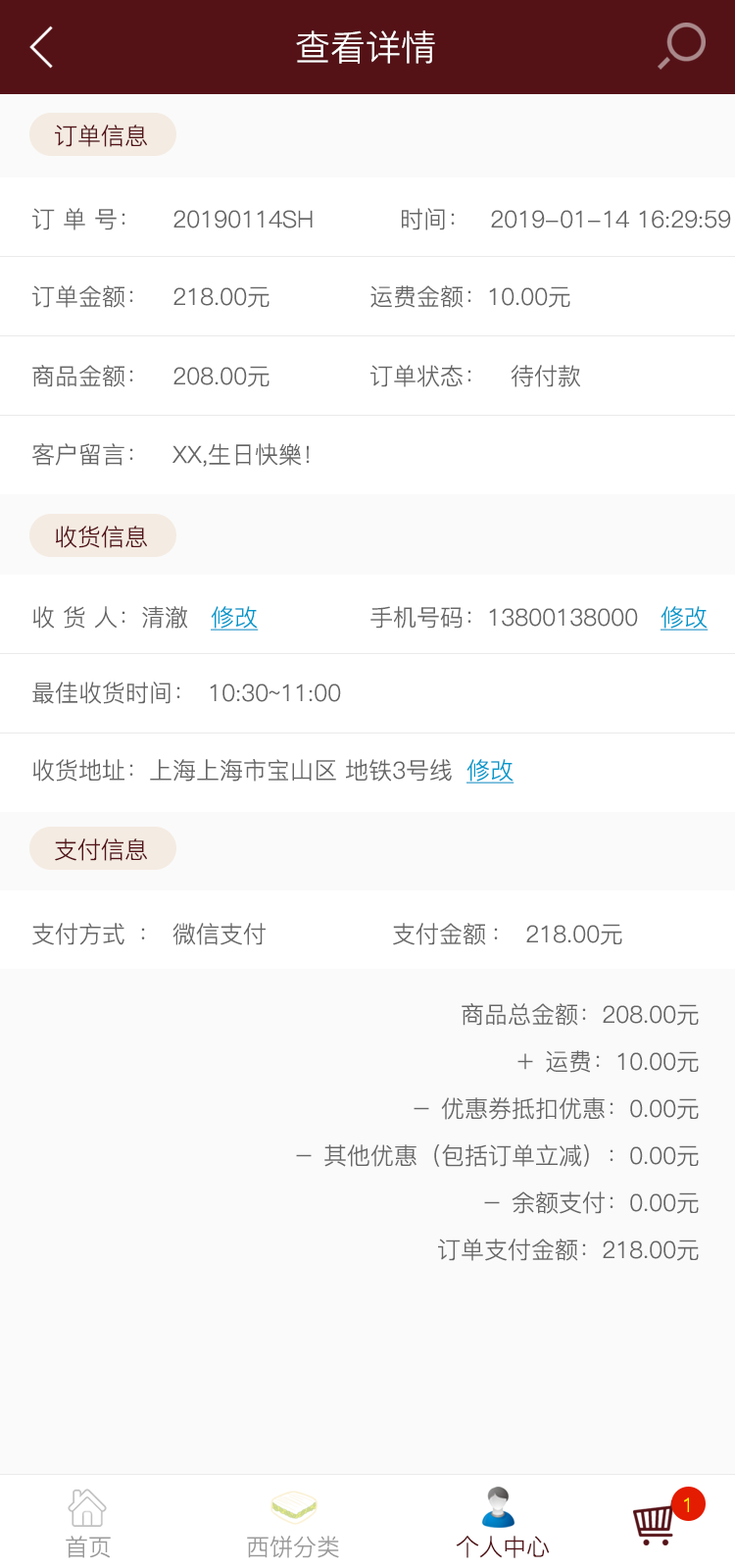
<style>
.page{position:relative;width:735px;height:1568px;background:#ffffff}
.page>*{position:absolute;margin:0}
.t1{font:35.3px "PingFang-SC-Regular";color:#ffffff}
.t2{font:23.5px "PingFang-SC-Regular";color:#541217}
.t3{font:23.5px "PingFang-SC-Regular";color:#666666}
.t4{font:23.5px "PingFang-SC-Regular";color:#0099cc;text-decoration:underline}
.t5{font:23.5px/23.5px "PingFang-SC-Regular";color:#666666}
.t6{font:19.6px "PingFang-SC-Regular";color:#ffff00}
.t7{font:23.5px "PingFang-SC-Regular";color:#999999}
</style>
<div class="page">
<p class="t1" style="left:296px;top:30px;width:139px;height:34px">查看详情</p>
<p class="t2" style="left:55px;top:125px;width:92px;height:22px">订单信息</p>
<p class="t3" style="left:32px;top:208px;width:700px;height:22px">订 单 号： 20190114SH           时间： 2019-01-14 16:29:59</p>
<p class="t3" style="left:32px;top:285px;width:238px;height:23px">订单金额： 218.00元</p>
<p class="t3" style="left:371px;top:285px;width:200px;height:23px">运费金额：10.00元</p>
<p class="t3" style="left:32px;top:365px;width:238px;height:22px">商品金额： 208.00元</p>
<p class="t3" style="left:371px;top:365px;width:210px;height:22px">订单状态： 待付款</p>
<p class="t3" style="left:32px;top:443px;width:278px;height:24px">客户留言： XX,生日快樂！</p>
<p class="t2" style="left:56px;top:526px;width:91px;height:22px">收货信息</p>
<p class="t3" style="left:33px;top:606px;width:155px;height:23px">收 货 人：清澈</p>
<p class="t4" style="left:211px;top:606px;width:48px;height:25px">修改</p>
<p class="t3" style="left:371px;top:606px;width:267px;height:23px">手机号码：13800138000</p>
<p class="t4" style="left:661px;top:606px;width:48px;height:25px">修改</p>
<p class="t3" style="left:32px;top:682px;width:309px;height:22px">最佳收货时间： 10:30~11:00</p>
<p class="t3" style="left:33px;top:759px;width:419px;height:23px">收货地址：上海上海市宝山区 地铁3号线</p>
<p class="t4" style="left:467px;top:759px;width:48px;height:25px">修改</p>
<p class="t2" style="left:55px;top:838px;width:92px;height:23px">支付信息</p>
<p class="t3" style="left:32px;top:923px;width:591px;height:22px">支付方式 ： 微信支付                支付金额 ： 218.00元</p>
<p class="t5" style="left:296px;top:1003px;width:403px;height:258px;text-align:right">商品总金额：208.00元<br><br>＋ 运费：10.00元<br><br>－ 优惠券抵扣优惠：0.00元<br><br>－ 其他优惠（包括订单立减）：0.00元<br><br>－ 余额支付：0.00元<br><br>订单支付金额：218.00元</p>
<p class="t6" style="left:684px;top:1497px;width:5px;height:15px">1</p>
<p class="t7" style="left:66px;top:1536px;width:45px;height:22px">首页</p>
<p class="t7" style="left:247px;top:1536px;width:92px;height:22px">西饼分类</p>
<p class="t2" style="left:456px;top:1536px;width:94px;height:22px">个人中心</p>
</div>
